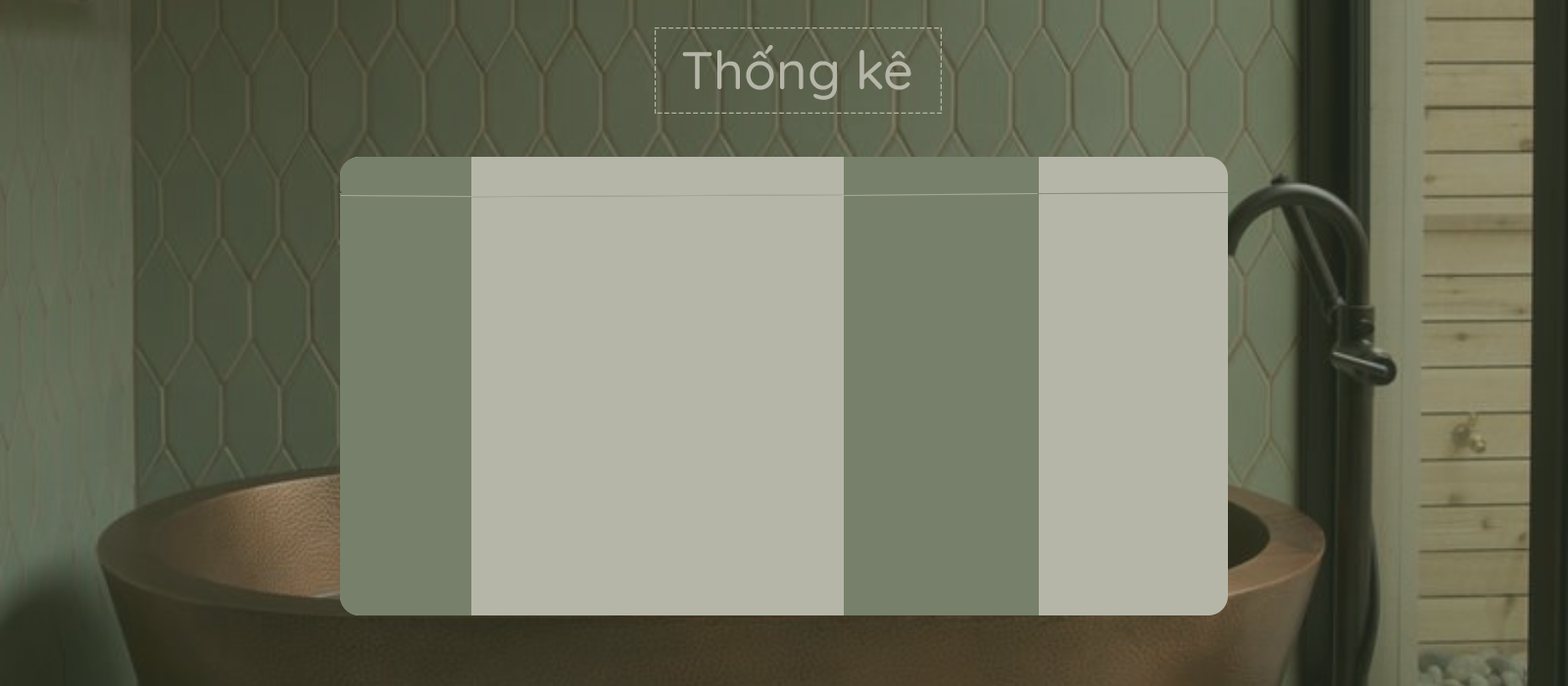
<style>
.page{position:relative;width:1568px;height:686px;background:#b5b6a8}
.page>*{position:absolute;margin:0}
.t1{font:52.9px "Quicksand-Medium";color:#b5b6a8}
</style>
<div class="page">
<p class="t1" style="left:682px;top:45px;width:229px;height:55px">Thống kê</p>
</div>
